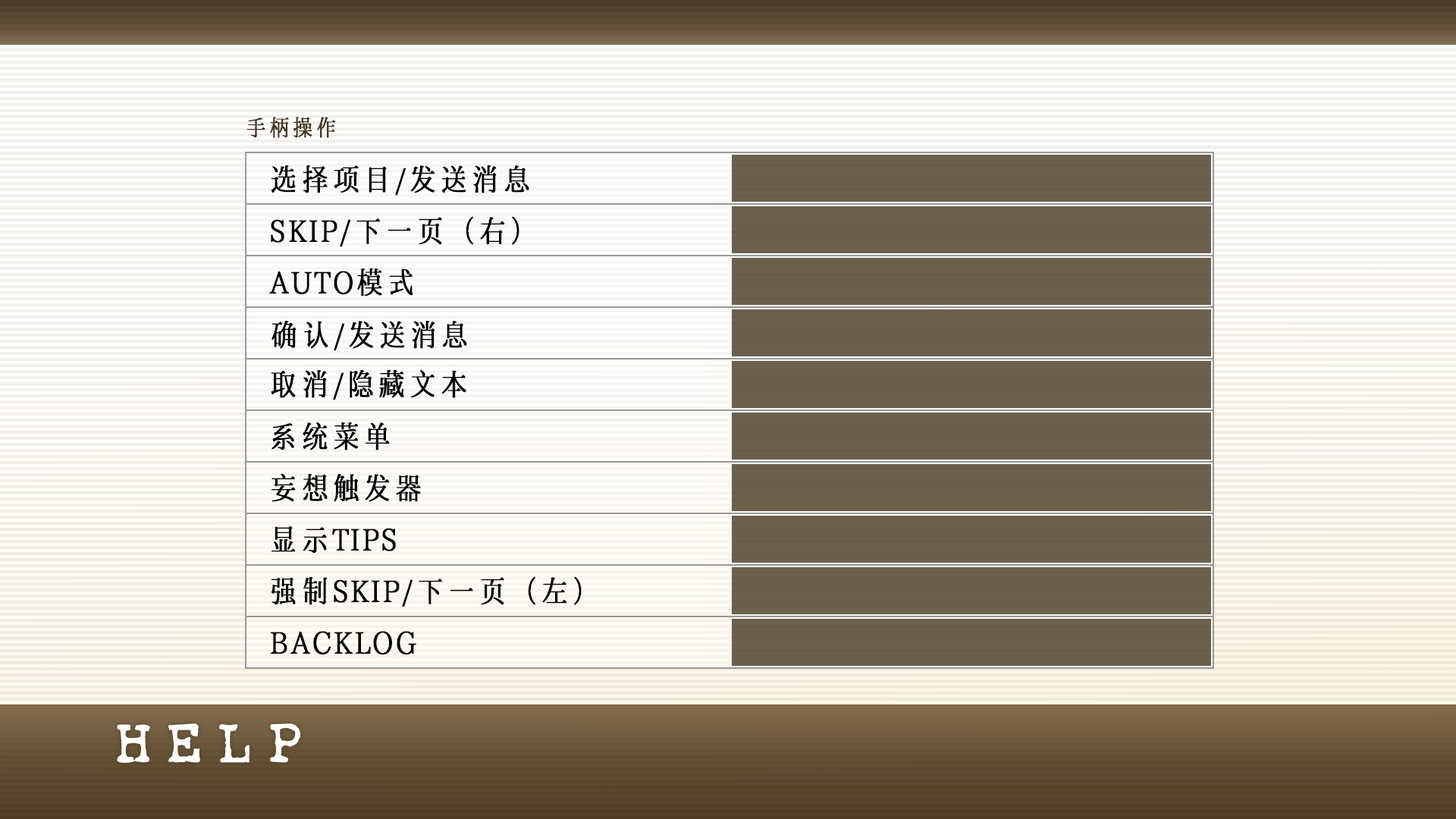
<style>
.page{position:relative;width:1456px;height:819px}
.page>*{position:absolute;margin:0}
.t1{font:22.7px "LXGWHeartSerif";color:#483922;font-weight:bold}
.t2{font:30.3px "LXGWHeartSerif";color:#000000;font-weight:bold}
</style>
<div class="page">
<p class="t1" style="left:246px;top:117px;width:89px;height:21px">手柄操作</p>
<p class="t2" style="left:271px;top:165px;width:258px;height:31px">选择项目/发送消息</p>
<p class="t2" style="left:271px;top:216px;width:248px;height:31px">SKIP/下一页（右）</p>
<p class="t2" style="left:269px;top:268px;width:144px;height:29px">AUTO模式</p>
<p class="t2" style="left:271px;top:321px;width:196px;height:30px">确认/发送消息</p>
<p class="t2" style="left:271px;top:370px;width:195px;height:30px">取消/隐藏文本</p>
<p class="t2" style="left:271px;top:422px;width:119px;height:28px">系统菜单</p>
<p class="t2" style="left:271px;top:473px;width:150px;height:29px">妄想触发器</p>
<p class="t2" style="left:271px;top:526px;width:125px;height:27px">显示TIPS</p>
<p class="t2" style="left:271px;top:576px;width:311px;height:31px">强制SKIP/下一页（左）</p>
<p class="t2" style="left:270px;top:631px;width:146px;height:24px">BACKLOG</p>
</div>
